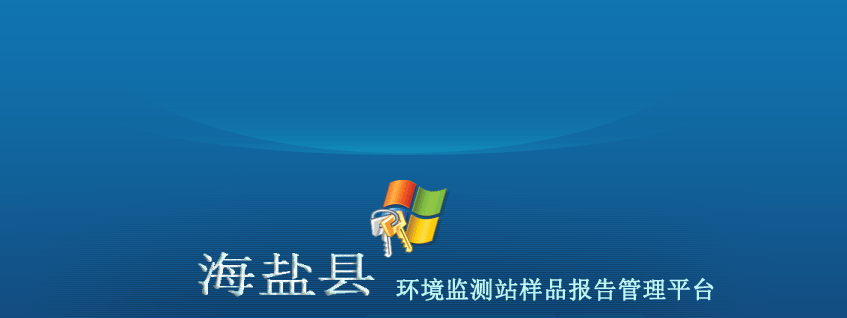
<style>
.page{position:relative;width:847px;height:318px}
.page>*{position:absolute;margin:0}
.t1{font:48px "Terminal";font-weight:bold}
.t2{font:24px "SimSun";color:#bef4f4;font-weight:bold}
</style>
<div class="page">
<p class="t1" style="left:198px;top:252px;width:177px;height:45px">海盐县</p>
<p class="t2" style="left:396px;top:277px;width:318px;height:24px">环境监测站样品报告管理平台</p>
</div>
